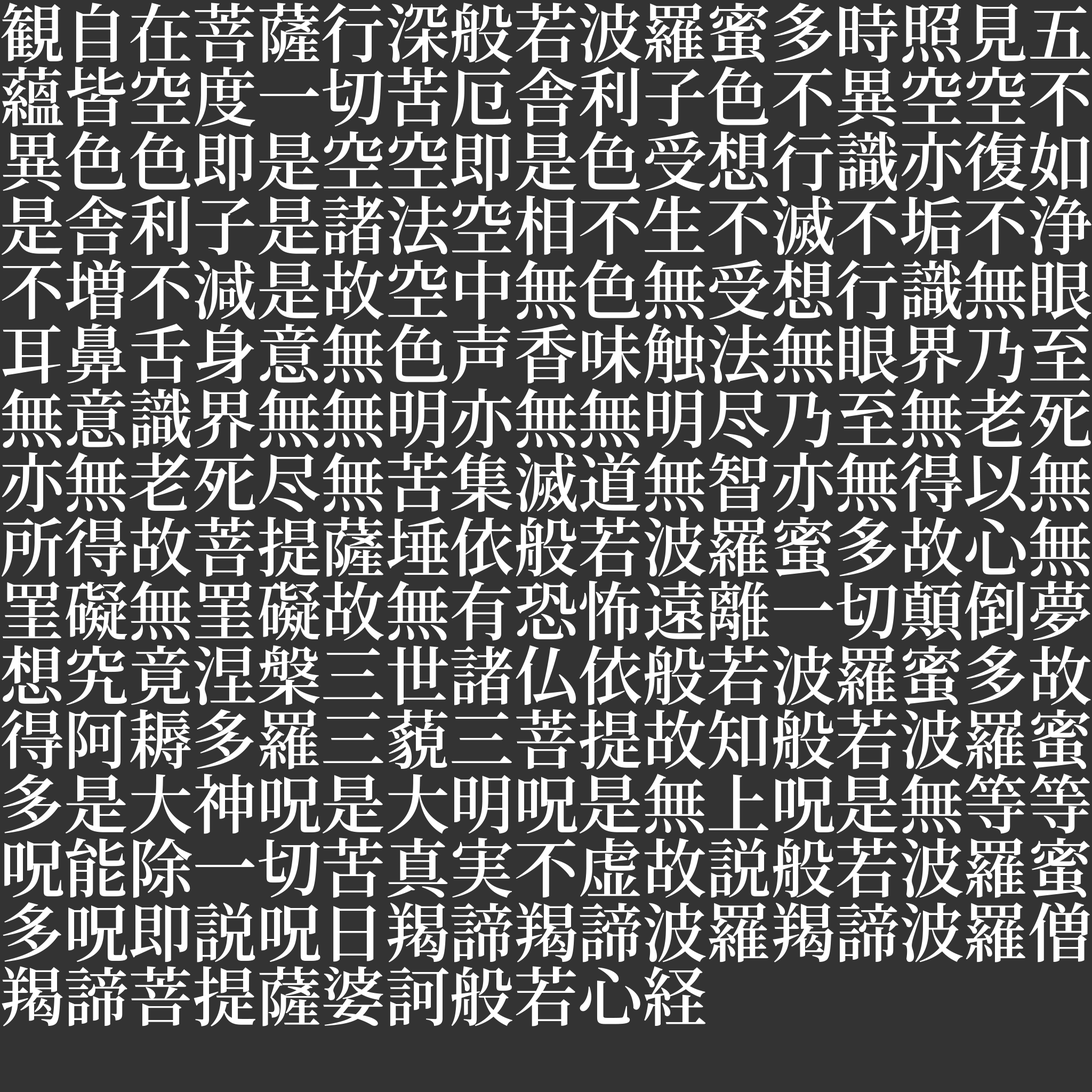
<style>
.page{position:relative;width:1092px;height:1092px;background:#333333}
.page>*{position:absolute;margin:0}
.t1{font:64.2px/64.2px "NotoSerifJP-SemiBold";color:#ffffff}
</style>
<div class="page">
<p class="t1" style="left:1px;top:3px;width:1090px;height:1023px">観自在菩薩行深般若波羅蜜多時照見五<br>蘊皆空度一切苦厄舎利子色不異空空不<br>異色色即是空空即是色受想行識亦復如<br>是舎利子是諸法空相不生不滅不垢不浄<br>不増不減是故空中無色無受想行識無眼<br>耳鼻舌身意無色声香味触法無眼界乃至<br>無意識界無無明亦無無明尽乃至無老死<br>亦無老死尽無苦集滅道無智亦無得以無<br>所得故菩提薩埵依般若波羅蜜多故心無<br>罣礙無罣礙故無有恐怖遠離一切顛倒夢<br>想究竟涅槃三世諸仏依般若波羅蜜多故<br>得阿耨多羅三藐三菩提故知般若波羅蜜<br>多是大神呪是大明呪是無上呪是無等等<br>呪能除一切苦真実不虚故説般若波羅蜜<br>多呪即説呪日羯諦羯諦波羅羯諦波羅僧<br>羯諦菩提薩婆訶般若心経</p>
</div>
